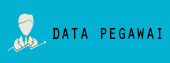
<style>
.page{position:relative;width:170px;height:63px;background:#03b2d2}
.page>*{position:absolute;margin:0}
.t1{font:20.6px "OratorStd";color:#020202;scale:0.76 1}
</style>
<div class="page">
<p class="t1" style="left:52px;top:28px;width:110px;height:11px">data pegawai</p>
</div>
